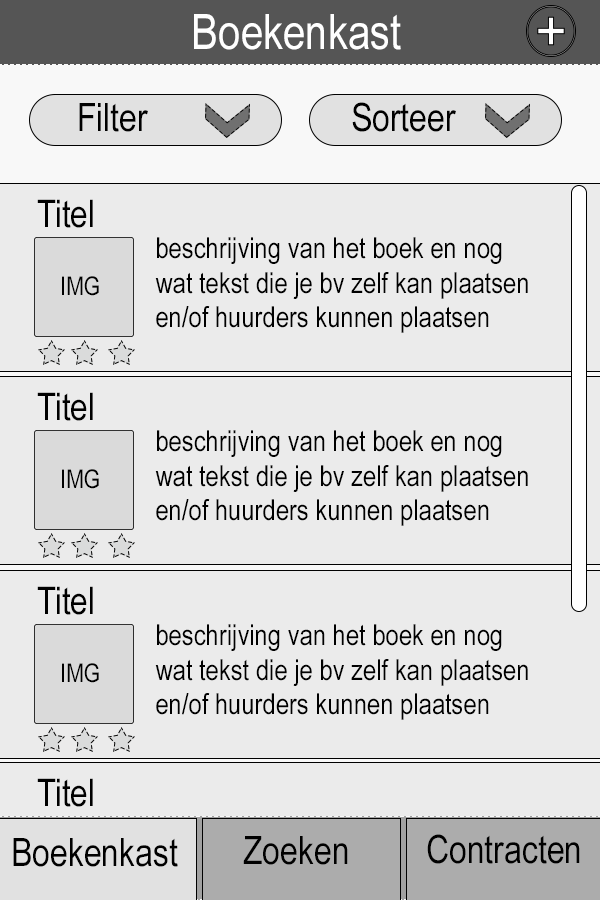
<style>
.page{position:relative;width:600px;height:900px;background:#ebebeb}
.page>*{position:absolute;margin:0}
.t1{font:49px "ArialNarrow";color:#ffffff}
.t2{font:39px "ArialNarrow";color:#000000}
.t3{font:38px "ArialNarrow";color:#000000}
.t4{font:29px "ArialNarrow";color:#000000}
.t5{font:26px "ArialNarrow";color:#000000}
</style>
<div class="page">
<p class="t1" style="left:194px;top:14px;width:207px;height:36px">Boekenkast</p>
<p class="t2" style="left:352px;top:102px;width:104px;height:30px">Sorteer</p>
<p class="t2" style="left:79px;top:103px;width:69px;height:29px">Filter</p>
<p class="t3" style="left:37px;top:199px;width:56px;height:29px">Titel</p>
<p class="t4" style="left:155px;top:237px;width:373px;height:96px">beschrijving van het boek en nog wat tekst die je bv zelf kan plaatsen en/of huurders kunnen plaatsen</p>
<p class="t5" style="left:62px;top:276px;width:37px;height:20px">IMG</p>
<p class="t3" style="left:37px;top:392px;width:56px;height:29px">Titel</p>
<p class="t4" style="left:155px;top:430px;width:373px;height:96px">beschrijving van het boek en nog wat tekst die je bv zelf kan plaatsen en/of huurders kunnen plaatsen</p>
<p class="t5" style="left:62px;top:469px;width:37px;height:20px">IMG</p>
<p class="t3" style="left:37px;top:586px;width:56px;height:29px">Titel</p>
<p class="t4" style="left:155px;top:624px;width:373px;height:96px">beschrijving van het boek en nog wat tekst die je bv zelf kan plaatsen en/of huurders kunnen plaatsen</p>
<p class="t5" style="left:62px;top:663px;width:37px;height:20px">IMG</p>
<p class="t3" style="left:37px;top:778px;width:56px;height:29px">Titel</p>
<p class="t2" style="left:13px;top:838px;width:165px;height:29px">Boekenkast</p>
<p class="t2" style="left:243px;top:836px;width:105px;height:29px">Zoeken</p>
<p class="t2" style="left:427px;top:834px;width:153px;height:30px">Contracten</p>
</div>
